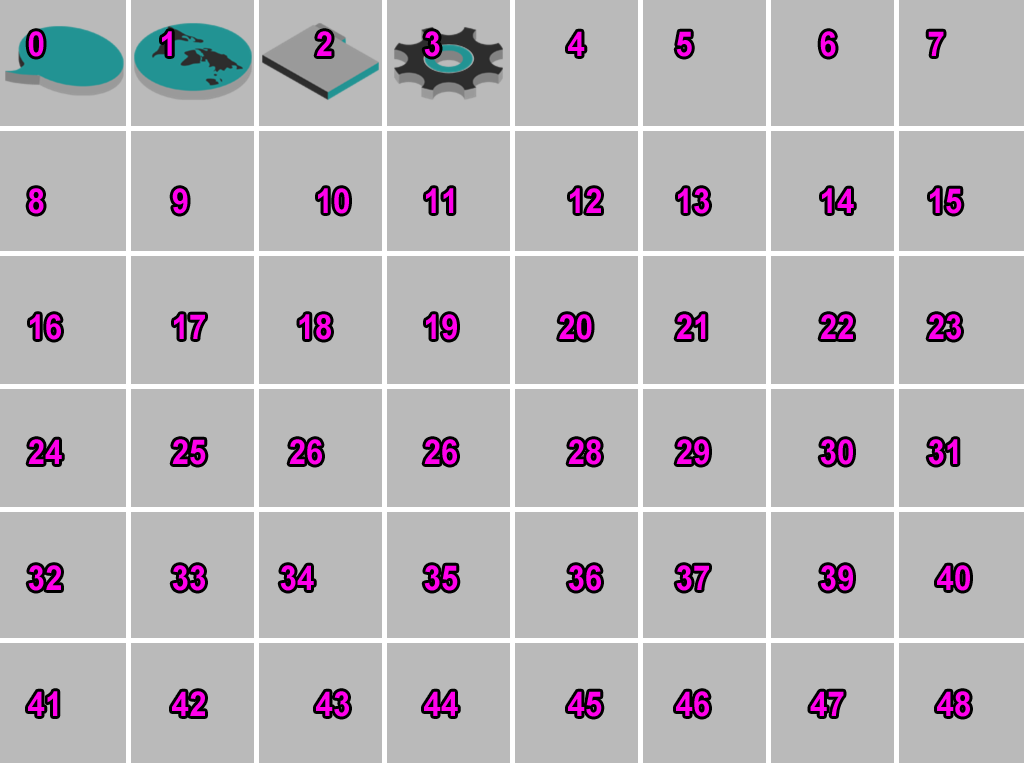
<style>
.page{position:relative;width:1024px;height:768px;background:#bababa}
.page>*{position:absolute;margin:0}
.t1{font:34px/31.4px "Arial-BoldMT";color:#ff00ea;scale:0.93 1}
</style>
<div class="page">
<p class="t1" style="left:28px;top:31px;width:942px;height:686px">0             1    2    3    4   5    6   7<br><br><br><br><br> 8    9    10   11    12   13    14   15<br><br><br><br> 16    17     18   19      20   21    22   23<br><br><br><br> 24    25    26   26    28   29    30   31  <br><br><br><br> 32    33   34    35    36   37    39    40<br><br><br><br> 41    42    43   44    45   46      47    48</p>
</div>
